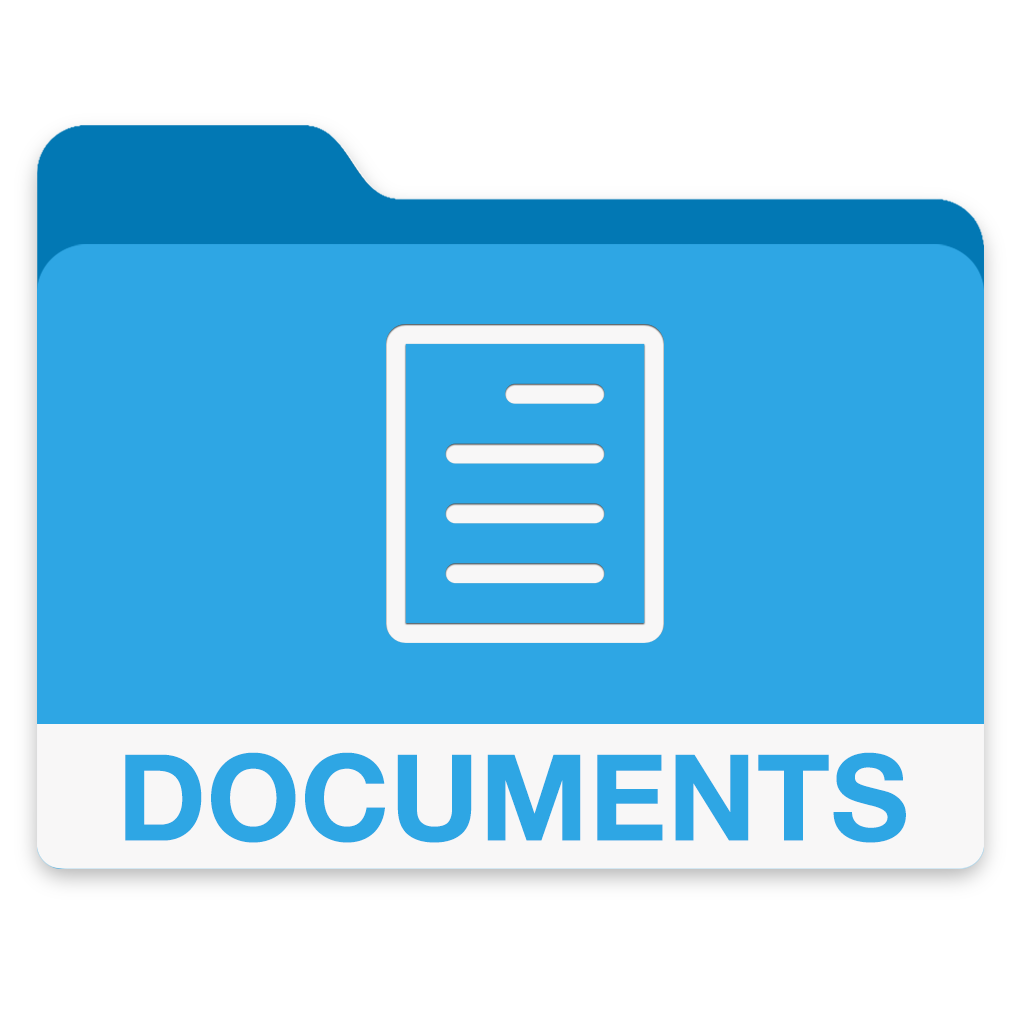
<style>
.page{position:relative;width:1024px;height:1024px;background:#2ea6e4}
.page>*{position:absolute;margin:0}
.t1{font:120px "HelveticaNeue-Bold";letter-spacing:0.005em;color:#2ea6e4}
</style>
<div class="page">
<p class="t1" style="left:125px;top:752px;width:781px;height:91px">DOCUMENTS</p>
</div>
